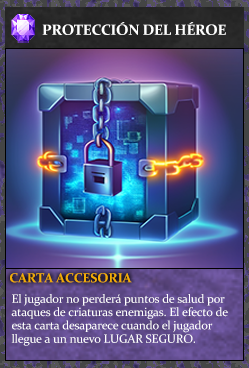
<style>
.page{position:relative;width:249px;height:368px}
.page>*{position:absolute;margin:0}
.t1{font:14.7px "Constantia-Bold";letter-spacing:-0.02em;color:#ffffff}
.t2{font:13.3px "Constantia-Bold";letter-spacing:-0.02em;color:#f2ac05}
.t3{font:12px/13.3px "Constantia";letter-spacing:-0.02em;color:#ffffff}
</style>
<div class="page">
<p class="t1" style="left:42px;top:22px;width:184px;height:13px">PROTECCIÓN DEL HÉROE</p>
<p class="t2" style="left:10px;top:273px;width:122px;height:10px">CARTA ACCESORIA</p>
<p class="t3" style="left:11px;top:294px;width:217px;height:52px">El jugador no perderá puntos de salud por<br>ataques de criaturas enemigas. El efecto de<br>esta carta desaparece cuando el jugador<br>llegue a un nuevo LUGAR SEGURO.</p>
</div>
